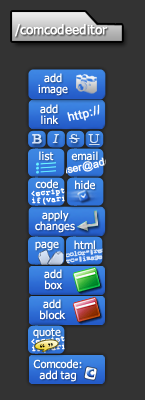
<style>
.page{position:relative;width:145px;height:400px;background:#333333}
.page>*{position:absolute;margin:0}
.t1{font:12px "Tahoma";color:#ffffff;font-weight:bold;scale:1.09 1}
.t2{font:11px/11px "Tahoma";color:#ffffff}
.t3{font:12px "ArialMT";color:#ffffff;font-weight:bold}
.t4{font:13px "TimesNewRomanPSMT";color:#d7e5f8;font-weight:bold;scale:1.13 1}
.t5{font:13px "TimesNewRomanPSMT";color:#d6e4f8;font-style:italic;scale:1.13 1}
.t6{font:13px "TimesNewRomanPSMT";color:#d7e5f8;scale:1.13 1}
.t7{font:11px "Tahoma";color:#ffffff}
.t8{font:10.4px "ArialMT";font-weight:bold}
.t9{font:7.5px/6px "Courier";color:#d6e3f7;font-weight:bold}
.t10{font:10.8px "TimesNewRomanPSMT";letter-spacing:0.3em;color:#000000;font-weight:bold}
</style>
<div class="page">
<p class="t1" style="left:15px;top:24px;width:93px;height:13px">/comcodeeditor</p>
<p class="t2" style="left:38px;top:73px;width:30px;height:23px;text-align:center">add<br>image</p>
<p class="t2" style="left:40px;top:104px;width:19px;height:20px;text-align:center">add<br>link</p>
<p class="t3" style="left:67px;top:104px;width:33px;height:18px;rotate:-14deg">http://</p>
<p class="t4" style="left:32px;top:134px;width:10px;height:10px">B</p>
<p class="t5" style="left:52px;top:134px;width:7px;height:9px">I</p>
<p class="t6" style="left:70px;top:134px;width:8px;height:9px">S</p>
<p class="t6" style="left:88px;top:134px;width:12px;height:9px">U</p>
<p class="t7" style="left:39px;top:151px;width:15px;height:10px">list</p>
<p class="t8" style="left:61px;top:154px;width:70px;height:21px;rotate:-12deg">user@address</p>
<p class="t7" style="left:71px;top:151px;width:27px;height:10px">email</p>
<p class="t7" style="left:35px;top:179px;width:23px;height:10px">code</p>
<p class="t7" style="left:75px;top:180px;width:20px;height:10px">hide</p>
<p class="t2" style="left:35px;top:210px;width:40px;height:23px;text-align:center">apply<br>changes</p>
<p class="t7" style="left:35px;top:241px;width:24px;height:10px">page</p>
<p class="t9" style="left:62px;top:246px;width:47px;height:18px;rotate:-7deg">color=”red”<br>src=”image”</p>
<p class="t7" style="left:74px;top:240px;width:21px;height:10px">html</p>
<p class="t2" style="left:44px;top:269px;width:18px;height:21px;text-align:center">add<br>box</p>
<p class="t2" style="left:40px;top:299px;width:26px;height:21px;text-align:center">add<br>block</p>
<p class="t7" style="left:33px;top:328px;width:28px;height:11px">quote</p>
<p class="t10" style="left:40px;top:343px;width:13px;height:5px;rotate:-8deg">“”</p>
<p class="t2" style="left:33px;top:359px;width:49px;height:23px;text-align:center">Comcode:<br>add tag</p>
</div>
